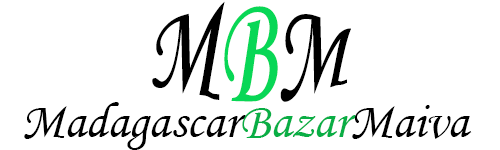
<style>
.page{position:relative;width:500px;height:150px;background:#ffffff}
.page>*{position:absolute;margin:0}
.t1{font:86.9px "MonotypeCorsiva";color:#000000}
.t2{font:86.9px "MonotypeCorsiva";color:#08d756}
.t3{font:50.5px "MonotypeCorsiva";color:#000000}
.t4{font:50.5px "MonotypeCorsiva";color:#09ae45}
</style>
<div class="page">
<p class="t1" style="left:152px;top:1px;width:199px;height:101px">M<span class="t2">B</span>M</p>
<p class="t3" style="left:24px;top:102px;width:448px;height:48px">Madagascar<span class="t4">Bazar</span>Maiva</p>
</div>
